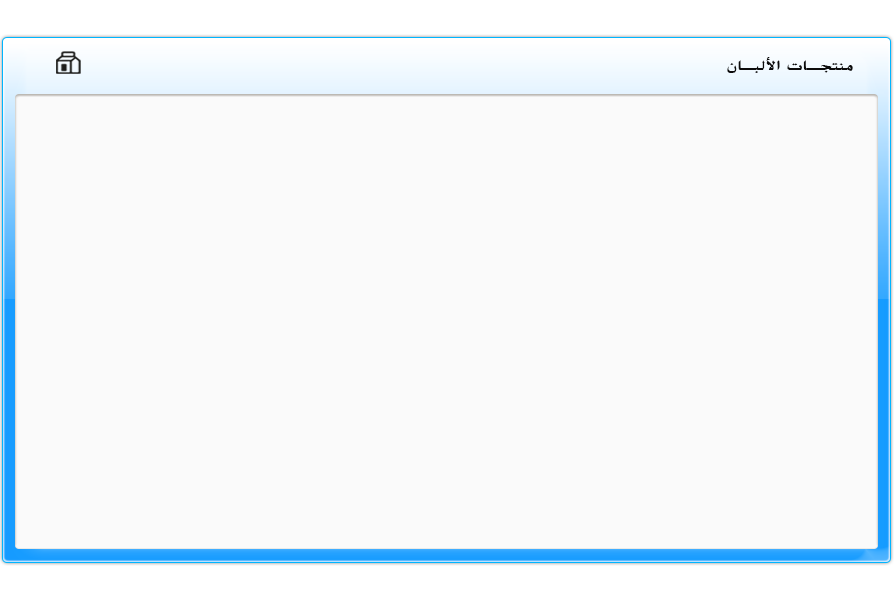
<style>
.page{position:relative;width:894px;height:600px;background:#fafafa}
.page>*{position:absolute;margin:0}
.t1{font:14.9px "BoutrosAdsMedium";color:#0c0b0b;scale:1.13 1}
</style>
<div class="page">
<p class="t1" style="left:727px;top:57px;width:126px;height:16px">منتجـات الألبـان</p>
</div>
